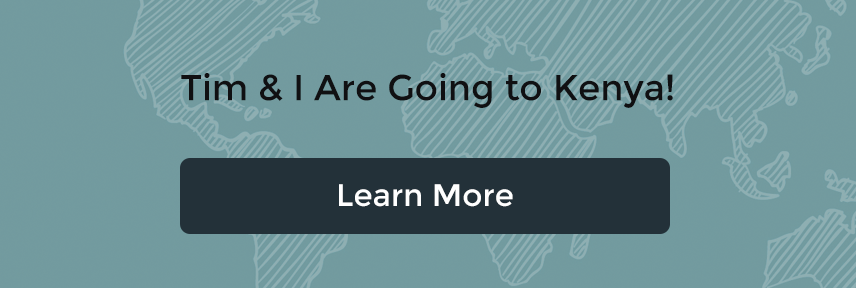
<style>
.page{position:relative;width:856px;height:288px}
.page>*{position:absolute;margin:0}
.t1{font:36px "Montserrat-Regular";color:#101012}
.t2{font:31px "Montserrat-Regular";color:#ffffff}
</style>
<div class="page">
<p class="t1" style="left:181px;top:73px;width:492px;height:35px">Tim &amp; I Are Going to Kenya!</p>
<p class="t2" style="left:339px;top:184px;width:174px;height:23px">Learn More</p>
</div>
